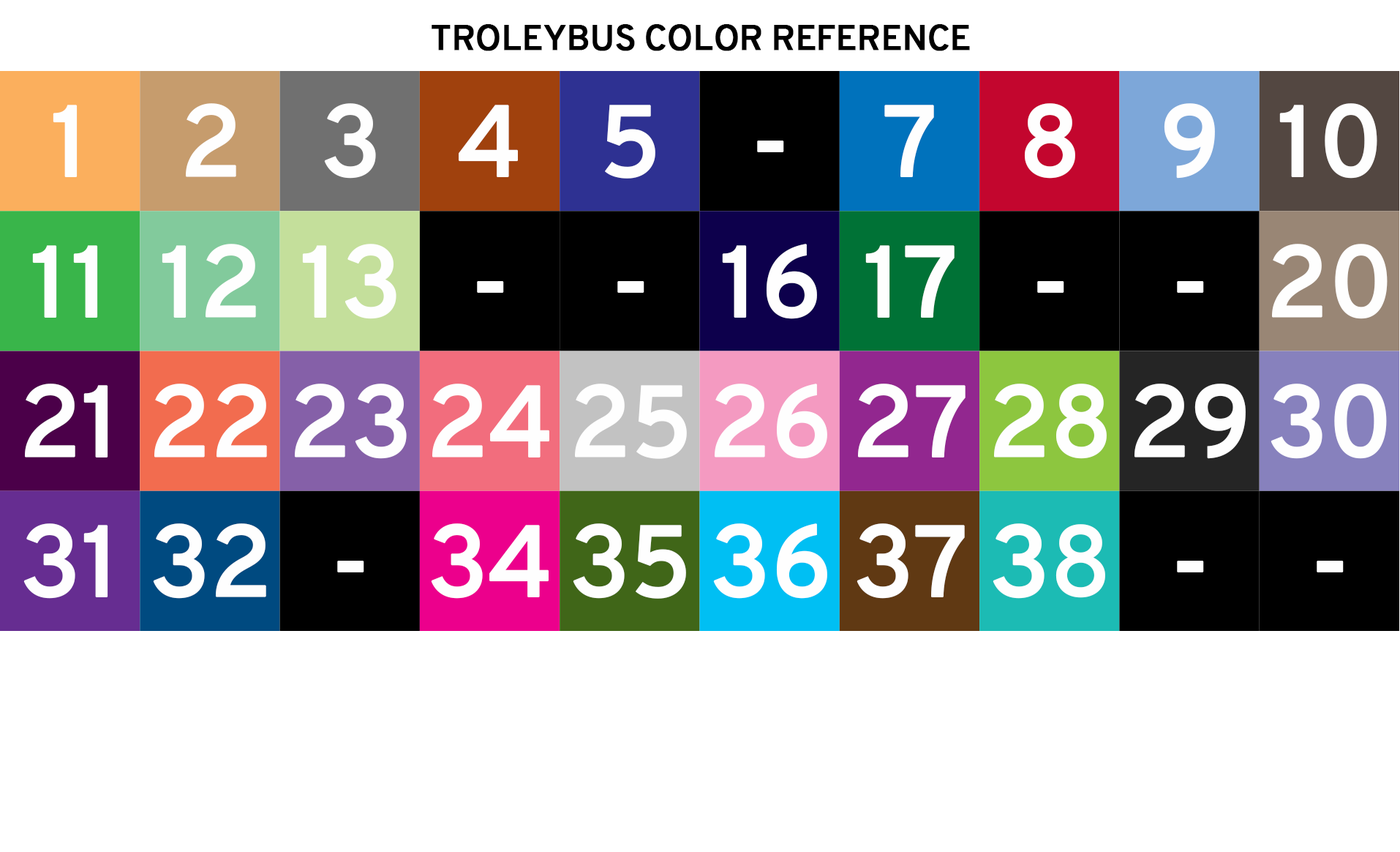
<style>
.page{position:relative;width:1400px;height:852px;background:#ffffff}
.page>*{position:absolute;margin:0}
.t1{font:35.1px "Overpass-Reg";letter-spacing:-0.025em;color:#000000;font-weight:bold}
.t2{font:100.7px "Overpass-Reg";letter-spacing:-0.025em;color:#fefefe;font-weight:bold}
</style>
<div class="page">
<p class="t1" style="left:432px;top:24px;width:538px;height:27px">TROLEYBUS COLOR REFERENCE</p>
<p class="t2" style="left:53px;top:105px;width:25px;height:72px">1</p>
<p class="t2" style="left:185px;top:103px;width:51px;height:74px">2</p>
<p class="t2" style="left:324px;top:103px;width:52px;height:76px">3</p>
<p class="t2" style="left:459px;top:105px;width:59px;height:72px">4</p>
<p class="t2" style="left:604px;top:105px;width:52px;height:74px">5</p>
<p class="t2" style="left:884px;top:105px;width:50px;height:72px">7</p>
<p class="t2" style="left:1024px;top:103px;width:51px;height:76px">8</p>
<p class="t2" style="left:1164px;top:103px;width:51px;height:76px">9</p>
<p class="t2" style="left:1280px;top:103px;width:98px;height:76px">10</p>
<p class="t2" style="left:757px;top:140px;width:27px;height:12px">-</p>
<p class="t2" style="left:32px;top:245px;width:66px;height:73px">11</p>
<p class="t2" style="left:162px;top:244px;width:94px;height:74px">12</p>
<p class="t2" style="left:302px;top:244px;width:95px;height:75px">13</p>
<p class="t2" style="left:722px;top:244px;width:95px;height:75px">16</p>
<p class="t2" style="left:865px;top:245px;width:90px;height:73px">17</p>
<p class="t2" style="left:1272px;top:244px;width:116px;height:75px">20</p>
<p class="t2" style="left:477px;top:281px;width:27px;height:12px">-</p>
<p class="t2" style="left:617px;top:281px;width:28px;height:12px">-</p>
<p class="t2" style="left:1037px;top:281px;width:27px;height:12px">-</p>
<p class="t2" style="left:1177px;top:281px;width:27px;height:12px">-</p>
<p class="t2" style="left:24px;top:383px;width:84px;height:74px">21</p>
<p class="t2" style="left:154px;top:383px;width:113px;height:74px">22</p>
<p class="t2" style="left:294px;top:383px;width:113px;height:76px">23</p>
<p class="t2" style="left:432px;top:383px;width:117px;height:74px">24</p>
<p class="t2" style="left:574px;top:383px;width:113px;height:76px">25</p>
<p class="t2" style="left:714px;top:383px;width:113px;height:76px">26</p>
<p class="t2" style="left:857px;top:383px;width:109px;height:74px">27</p>
<p class="t2" style="left:994px;top:383px;width:113px;height:76px">28</p>
<p class="t2" style="left:1134px;top:383px;width:112px;height:76px">29</p>
<p class="t2" style="left:1271px;top:383px;width:116px;height:76px">30</p>
<p class="t2" style="left:23px;top:523px;width:85px;height:75px">31</p>
<p class="t2" style="left:153px;top:523px;width:113px;height:75px">32</p>
<p class="t2" style="left:431px;top:523px;width:118px;height:75px">34</p>
<p class="t2" style="left:573px;top:523px;width:113px;height:75px">35</p>
<p class="t2" style="left:713px;top:523px;width:114px;height:75px">36</p>
<p class="t2" style="left:857px;top:523px;width:108px;height:75px">37</p>
<p class="t2" style="left:993px;top:523px;width:112px;height:75px">38</p>
<p class="t2" style="left:337px;top:560px;width:27px;height:12px">-</p>
<p class="t2" style="left:1177px;top:560px;width:27px;height:12px">-</p>
<p class="t2" style="left:1317px;top:560px;width:27px;height:12px">-</p>
</div>
